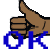
<style>
.page{position:relative;width:50px;height:50px;background:#ffffff}
.page>*{position:absolute;margin:0}
.t1{font:28.3px "WST_Engl";color:#0900c6;scale:1.11 1}
</style>
<div class="page">
<p class="t1" style="left:3px;top:31px;width:45px;height:18px">OK</p>
</div>
